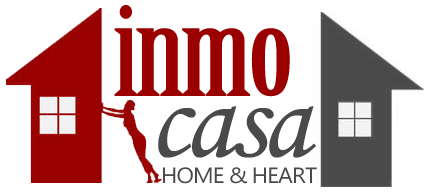
<style>
.page{position:relative;width:433px;height:196px;background:#ffffff}
.page>*{position:absolute;margin:0}
.t1{font:120px "BirchStd";letter-spacing:-0.04em;color:#9a0000;font-weight:bold;scale:1.29 1}
.t2{font:117px "MonotypeCorsiva";letter-spacing:-0.04em;color:#4a4a4a}
.t3{font:22px "Ebrima";letter-spacing:-0.04em;color:#4a4a4a;scale:1.05 1}
</style>
<div class="page">
<p class="t1" style="left:114px;top:5px;width:176px;height:92px">inmo</p>
<p class="t2" style="left:158px;top:106px;width:158px;height:52px">casa</p>
<p class="t3" style="left:163px;top:167px;width:154px;height:17px">HOME &amp; HEART</p>
</div>
